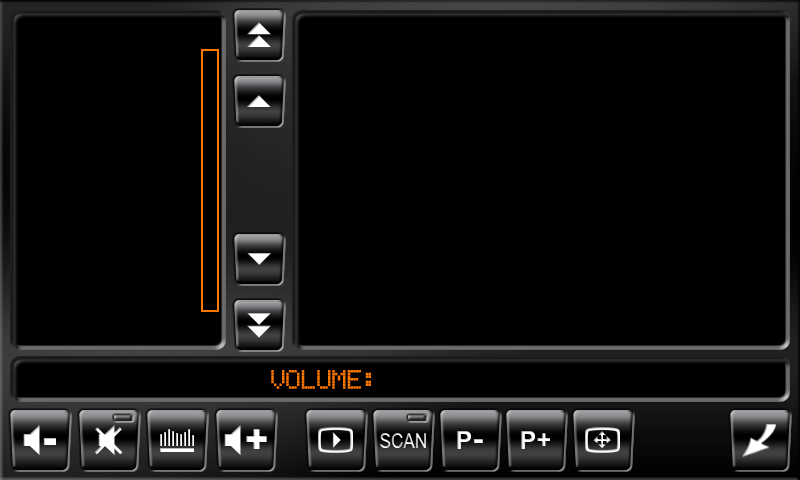
<style>
.page{position:relative;width:800px;height:480px;background:#000000}
.page>*{position:absolute;margin:0}
.t1{font:25px "EricssonGA628";color:#ff7800}
.t2{font:20.8px "ArialNarrow"}
</style>
<div class="page">
<p class="t1" style="left:271px;top:370px;width:100px;height:19px">VOLUME:</p>
<p class="t2" style="left:380px;top:433px;width:46px;height:15px">SCAN</p>
</div>
